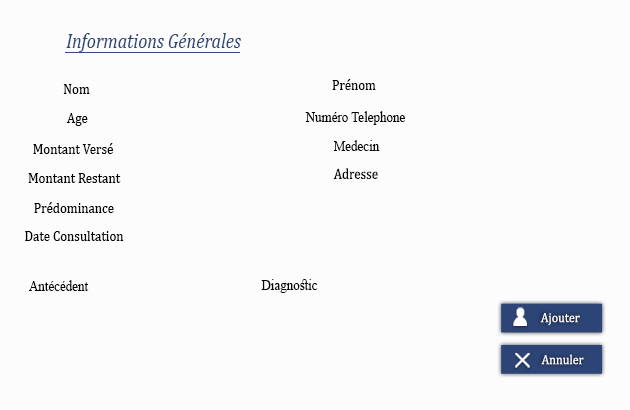
<style>
.page{position:relative;width:630px;height:410px;background:#fcfcfc}
.page>*{position:absolute;margin:0}
.t1{font:20.5px "Cambria-Italic";color:#2c4476;scale:0.88 1}
.t2{font:14.8px "Cambria";color:#000000;scale:0.88 1}
.t3{font:14.8px "Cambria";color:#030303;scale:0.88 1}
.t4{font:14.8px "TimesNewRomanPSMT";color:#030303;scale:0.88 1}
.t5{font:13.4px "Cambria";color:#fafafa;scale:0.9 1}
</style>
<div class="page">
<p class="t1" style="left:66px;top:33px;width:175px;height:19px">Informations Générales</p>
<p class="t2" style="left:63px;top:84px;width:27px;height:10px">Nom</p>
<p class="t3" style="left:332px;top:79px;width:44px;height:11px">Prénom</p>
<p class="t3" style="left:66px;top:113px;width:22px;height:13px">Age</p>
<p class="t4" style="left:305px;top:111px;width:100px;height:14px">Numéro Telephone</p>
<p class="t3" style="left:33px;top:143px;width:80px;height:11px">Montant Versé</p>
<p class="t4" style="left:333px;top:140px;width:47px;height:11px">Medecin</p>
<p class="t3" style="left:28px;top:173px;width:93px;height:10px">Montant Restant</p>
<p class="t3" style="left:333px;top:168px;width:45px;height:11px">Adresse</p>
<p class="t3" style="left:34px;top:202px;width:80px;height:11px">Prédominance</p>
<p class="t3" style="left:25px;top:231px;width:99px;height:10px">Date Consultation</p>
<p class="t4" style="left:29px;top:280px;width:60px;height:11px">Antécédent</p>
<p class="t4" style="left:261px;top:279px;width:57px;height:14px">Diagnostic</p>
<p class="t5" style="left:540px;top:313px;width:40px;height:13px">Ajouter</p>
<p class="t5" style="left:541px;top:354px;width:43px;height:11px">Annuler</p>
</div>
